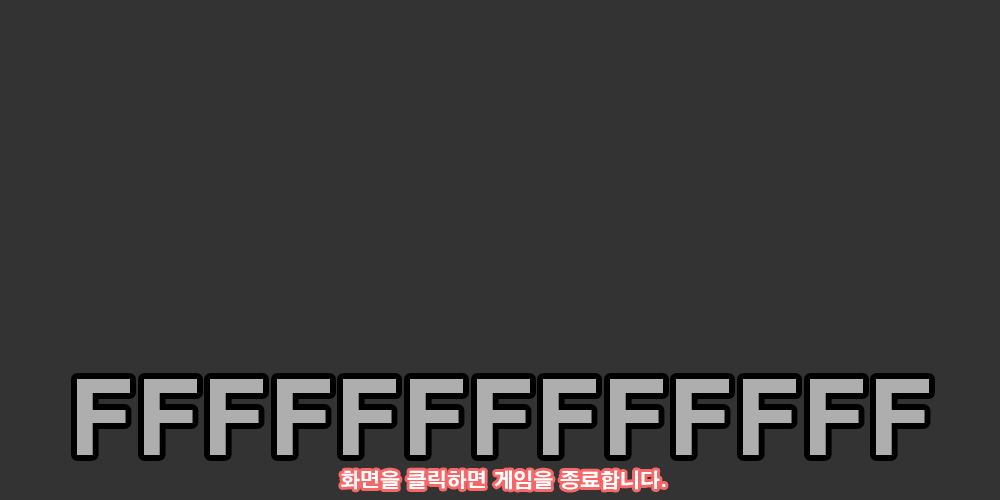
<style>
.page{position:relative;width:1000px;height:500px;background:#333333}
.page>*{position:absolute;margin:0}
.t1{font:100px "H2gtrE";color:#aeaeae}
.t2{font:20px "H2gtrE";color:#ffffff}
</style>
<div class="page">
<p class="t1" style="left:77px;top:379px;width:852px;height:76px">FFFFFFFFFFFFF</p>
<p class="t2" style="left:341px;top:470px;width:325px;height:20px">화면을 클릭하면 게임을 종료합니다.</p>
</div>
